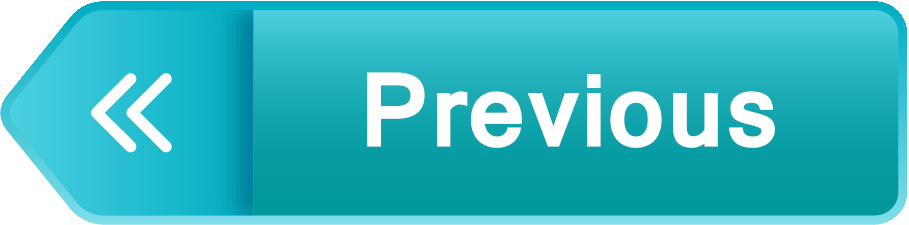
<style>
.page{position:relative;width:909px;height:225px}
.page>*{position:absolute;margin:0}
.t1{font:100px "Mangal-Bold";color:#ffffff}
</style>
<div class="page">
<p class="t1" style="left:367px;top:72px;width:408px;height:76px">Previous</p>
</div>
